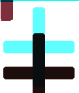
<style>
.page{position:relative;width:79px;height:93px;background:#ffffff}
.page>*{position:absolute;margin:0}
.t1{font:142.5px "MyriadPro-Regular";letter-spacing:0.1em;text-transform:uppercase;font-weight:bold;scale:0.92 1}
</style>
<div class="page">
<p class="t1" style="left:3px;top:6px;width:72px;height:80px">+</p>
</div>
